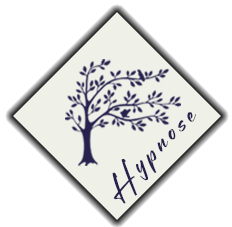
<style>
.page{position:relative;width:232px;height:227px;background:#ffffff}
.page>*{position:absolute;margin:0}
.t1{font:32.6px "Blacklist";letter-spacing:0.13em;color:#26214d}
</style>
<div class="page">
<p class="t1" style="left:112px;top:112px;width:84px;height:92px;rotate:-45deg">Hypnose</p>
</div>
